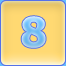
<style>
.page{position:relative;width:66px;height:66px}
.page>*{position:absolute;margin:0}
.t1{font:41px "Tahoma-Bold"}
</style>
<div class="page">
<p class="t1" style="left:21px;top:16px;width:25px;height:32px">8</p>
<p class="t1" style="left:21px;top:16px;width:25px;height:32px">8</p>
</div>
